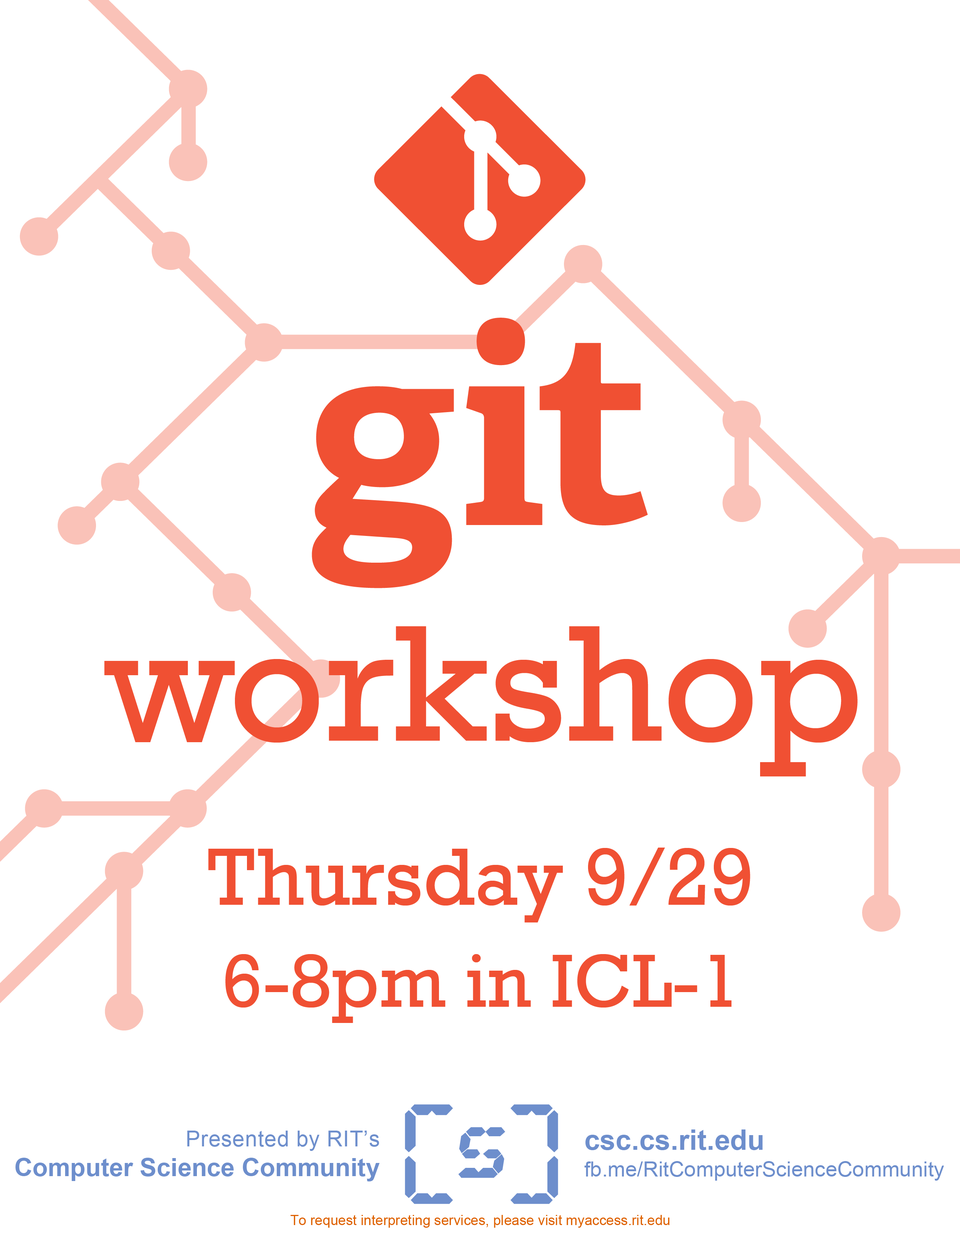
<style>
.page{position:relative;width:960px;height:1242px;background:#ffffff}
.page>*{position:absolute;margin:0}
.t1{font:168.5px "Rockwell";color:#f05033}
.t2{font:76.5px/102px "Rockwell";color:#f05033}
.t3{font:82.8px/102px "Rockwell";color:#f05033}
.t4{font:25.1px/29.8px "Arial-BoldMT";color:#6d8ecc}
.t5{font:22px/29.8px "ArialMT";letter-spacing:0.02em;color:#6d8ecc}
.t6{font:21.2px/26.7px "ArialMT";color:#6d8ecc}
.t7{font:28.2px/26.7px "Arial-BoldMT";color:#6d8ecc}
.t8{font:13.9px "ArialMT";color:#de6100}
</style>
<div class="page">
<p class="t1" style="left:104px;top:626px;width:754px;height:151px">workshop</p>
<p class="t2" style="left:208px;top:848px;width:542px;height:175px;text-align:center"><span class="t3">Thursday 9/29<br></span>6-8pm in ICL-1</p>
<p class="t4" style="left:15px;top:1131px;width:365px;height:51px;text-align:right"><span class="t5">Presented by RIT’s<br></span>Computer Science Community</p>
<p class="t6" style="left:584px;top:1130px;width:360px;height:51px"><span class="t7">csc.cs.rit.edu<br></span>fb.me/RitComputerScienceCommunity</p>
<p class="t8" style="left:290px;top:1215px;width:379px;height:13px">To request interpreting services, please visit myaccess.rit.edu</p>
</div>
